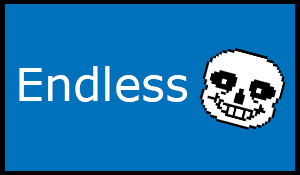
<style>
.page{position:relative;width:300px;height:175px;background:#0072bc}
.page>*{position:absolute;margin:0}
.t1{font:45.8px "MSReferenceSansSerif";color:#ffffff}
</style>
<div class="page">
<p class="t1" style="left:19px;top:66px;width:169px;height:36px">Endless</p>
</div>
